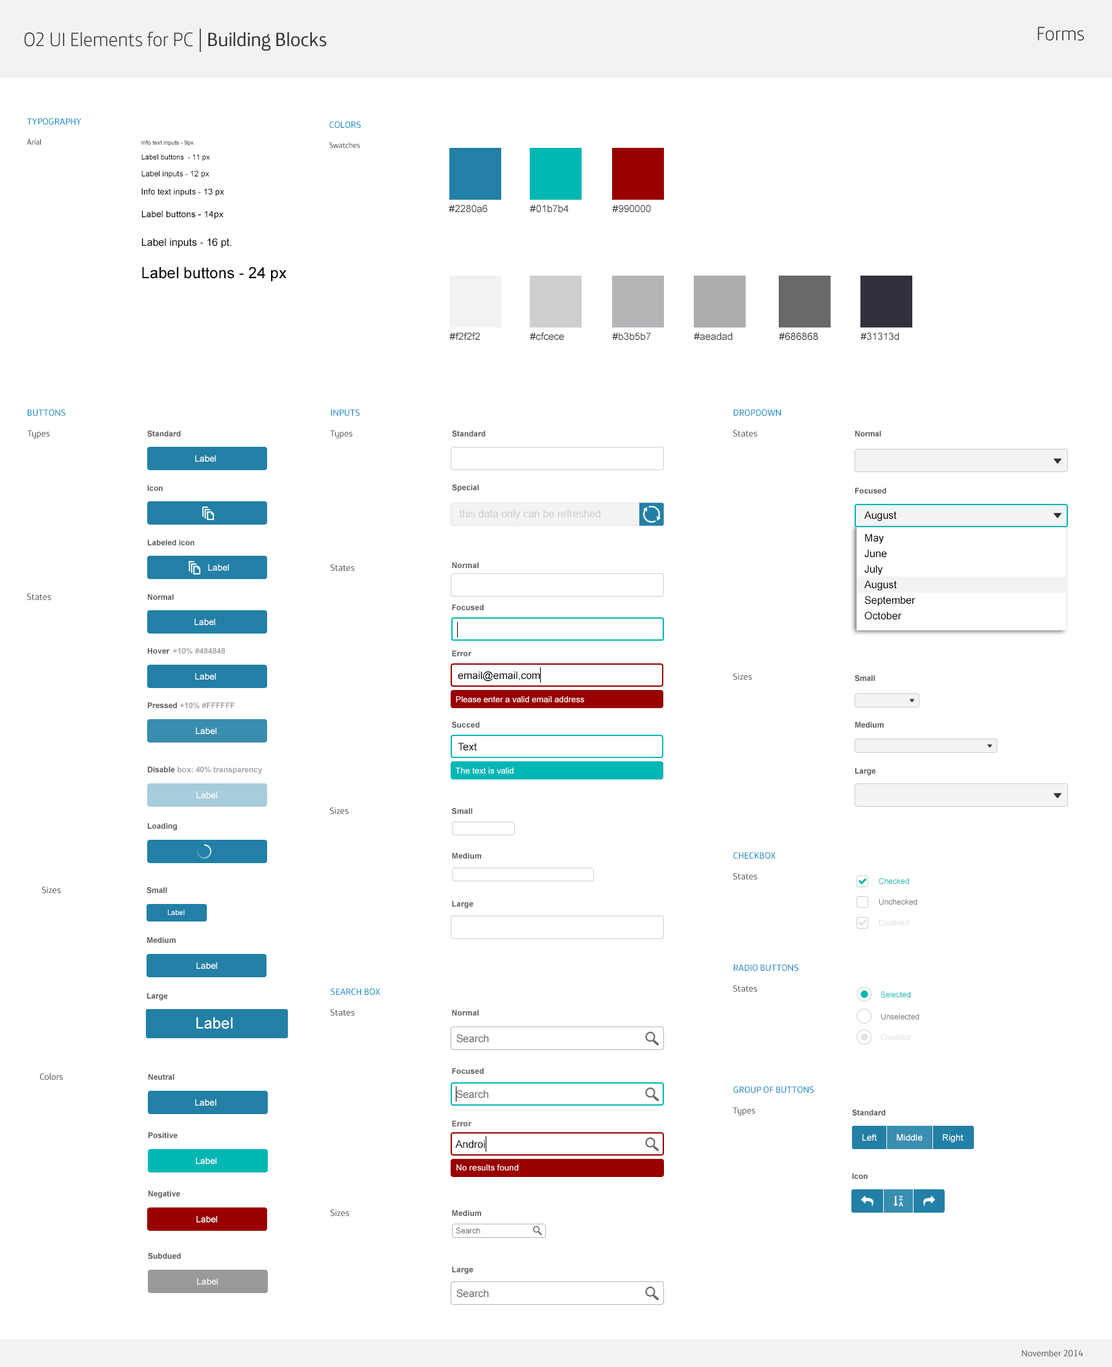
<style>
.page{position:relative;width:1112px;height:1367px;background:#ffffff}
.page>*{position:absolute;margin:0}
.t1{font:19.4px "TelefonicaHeadlineLight";color:#333333}
.t2{font:23.3px "TelefonicaHeadlineLight";color:#333333}
.t3{font:19.4px "TelefonicaText";color:#333333}
.t4{font:9.1px "TelefonicaText";color:#0086c3;text-transform:uppercase}
.t5{font:7.8px "MovistarText";color:#333333}
.t6{font:5.8px "ArialMT"}
.t7{font:7.8px "TelefonicaText";color:#333333}
.t8{font:7.1px "ArialMT";color:#000000}
.t9{font:7.8px "ArialMT";color:#000000}
.t10{font:8.4px "ArialMT";color:#000000}
.t11{font:9.9px "ArialMT";color:#444444}
.t12{font:9.9px "ArialMT";color:#333333;text-transform:uppercase}
.t13{font:9.1px "ArialMT";color:#000000}
.t14{font:10.4px "ArialMT";color:#000000}
.t15{font:15.6px "ArialMT";color:#000000}
.t16{font:9.1px "TelefonicaText";color:#585858}
.t17{font:7.8px "Arial-BoldMT";color:#585858}
.t18{font:9px "ArialMT";color:#ffffff}
.t19{font:10.4px "ArialMT";color:#cfcece}
.t20{font:10.4px/15.6px "ArialMT";color:#000000}
.t21{font:9.1px "ArialMT";color:#ffffff}
.t22{font:7.8px "Arial-BoldMT";color:#a6a5a5}
.t23{font:8.4px "ArialMT";color:#ffffff}
.t24{font:7.8px "ArialMT";color:#01b7b4}
.t25{font:7.8px "ArialMT";color:#767373}
.t26{font:7.1px "ArialMT";color:#ffffff}
.t27{font:7.8px "ArialMT";color:#cfcece}
.t28{font:15.6px "ArialMT";color:#ffffff}
.t29{font:10.4px "ArialMT";color:#696968}
.t30{font:7.8px "ArialMT";color:#686868}
</style>
<div class="page">
<p class="t1" style="left:24px;top:29px;width:303px;height:23px">O2 UI Elements for PC <span class="t2">| </span><span class="t3">Building Blocks</span></p>
<p class="t1" style="left:1038px;top:27px;width:46px;height:14px">Forms</p>
<p class="t4" style="left:27px;top:118px;width:55px;height:7px">Typography</p>
<p class="t4" style="left:329px;top:121px;width:32px;height:7px">Colors</p>
<p class="t5" style="left:27px;top:139px;width:14px;height:6px">Arial</p>
<p class="t6" style="left:141px;top:140px;width:53px;height:6px">Info text inputs - 9px</p>
<p class="t7" style="left:329px;top:142px;width:31px;height:7px">Swatches</p>
<p class="t8" style="left:141px;top:154px;width:69px;height:7px">Label buttons  - 11 px</p>
<p class="t9" style="left:141px;top:171px;width:68px;height:7px">Label inputs - 12 px</p>
<p class="t10" style="left:141px;top:188px;width:83px;height:8px">Info text inputs - 13 px</p>
<p class="t11" style="left:449px;top:205px;width:39px;height:8px"><span class="t12">#</span>2280a6</p>
<p class="t11" style="left:530px;top:205px;width:39px;height:8px"><span class="t12">#</span>01b7b4</p>
<p class="t11" style="left:612px;top:205px;width:39px;height:8px"><span class="t12">#</span>990000</p>
<p class="t13" style="left:142px;top:211px;width:82px;height:8px">Label buttons - 14px</p>
<p class="t14" style="left:142px;top:238px;width:90px;height:10px">Label inputs - 16 pt.</p>
<p class="t15" style="left:142px;top:267px;width:145px;height:14px">Label buttons - 24 px</p>
<p class="t11" style="left:449px;top:332px;width:31px;height:8px"><span class="t12">#</span>f2f2f2</p>
<p class="t11" style="left:530px;top:332px;width:34px;height:8px"><span class="t12">#</span>cfcece</p>
<p class="t11" style="left:612px;top:333px;width:39px;height:7px"><span class="t12">#</span>b3b5b7</p>
<p class="t11" style="left:694px;top:333px;width:39px;height:7px"><span class="t12">#</span>aeadad</p>
<p class="t12" style="left:779px;top:333px;width:39px;height:7px">#686868</p>
<p class="t11" style="left:861px;top:333px;width:38px;height:7px"><span class="t12">#</span>31313d</p>
<p class="t4" style="left:27px;top:409px;width:38px;height:7px">BUTTONS</p>
<p class="t4" style="left:331px;top:409px;width:29px;height:7px">INPUTS</p>
<p class="t4" style="left:733px;top:409px;width:48px;height:7px">DROPDOWN</p>
<p class="t16" style="left:27px;top:430px;width:23px;height:9px">Types</p>
<p class="t17" style="left:147px;top:431px;width:34px;height:6px">Standard</p>
<p class="t16" style="left:330px;top:430px;width:23px;height:9px">Types</p>
<p class="t17" style="left:452px;top:431px;width:34px;height:6px">Standard</p>
<p class="t16" style="left:733px;top:430px;width:24px;height:7px">States</p>
<p class="t17" style="left:855px;top:431px;width:26px;height:5px">Normal</p>
<p class="t18" style="left:195px;top:455px;width:21px;height:7px">Label</p>
<p class="t17" style="left:147px;top:485px;width:16px;height:6px">Icon</p>
<p class="t17" style="left:452px;top:484px;width:27px;height:8px">Special</p>
<p class="t17" style="left:855px;top:488px;width:31px;height:6px">Focused</p>
<p class="t19" style="left:459px;top:510px;width:142px;height:9px">this data only can be refreshed</p>
<p class="t14" style="left:864px;top:511px;width:33px;height:10px">August</p>
<p class="t20" style="left:864px;top:534px;width:52px;height:86px">May<br>June<br>July<br>August<br>September<br>October</p>
<p class="t17" style="left:148px;top:540px;width:47px;height:5px">Labeled icon</p>
<p class="t21" style="left:208px;top:564px;width:21px;height:7px">Label</p>
<p class="t16" style="left:330px;top:564px;width:25px;height:7px">States</p>
<p class="t17" style="left:452px;top:562px;width:27px;height:6px">Normal</p>
<p class="t16" style="left:27px;top:593px;width:24px;height:8px">States</p>
<p class="t17" style="left:148px;top:594px;width:26px;height:6px">Normal</p>
<p class="t17" style="left:452px;top:604px;width:32px;height:6px">Focused</p>
<p class="t18" style="left:195px;top:619px;width:20px;height:6px">Label</p>
<p class="t22" style="left:148px;top:648px;width:77px;height:6px"><span class="t17">Hover  </span>+10% #484848</p>
<p class="t17" style="left:452px;top:650px;width:19px;height:6px">Error</p>
<p class="t18" style="left:195px;top:673px;width:21px;height:7px">Label</p>
<p class="t14" style="left:458px;top:671px;width:82px;height:11px">email@email,com</p>
<p class="t16" style="left:733px;top:673px;width:19px;height:7px">Sizes</p>
<p class="t17" style="left:855px;top:675px;width:20px;height:7px">Small</p>
<p class="t23" style="left:456px;top:696px;width:128px;height:6px">Please enter a valid email address</p>
<p class="t22" style="left:148px;top:702px;width:87px;height:7px"><span class="t17">Pressed </span>+10% #FFFFFF</p>
<p class="t17" style="left:452px;top:722px;width:28px;height:6px">Succed</p>
<p class="t17" style="left:855px;top:722px;width:29px;height:6px">Medium</p>
<p class="t18" style="left:196px;top:728px;width:21px;height:6px">Label</p>
<p class="t14" style="left:458px;top:743px;width:19px;height:8px">Text</p>
<p class="t22" style="left:148px;top:767px;width:115px;height:7px"><span class="t17">Disable </span>box: 40% transparency</p>
<p class="t23" style="left:455px;top:767px;width:59px;height:7px">The text is valid</p>
<p class="t17" style="left:855px;top:768px;width:21px;height:8px">Large</p>
<p class="t18" style="left:196px;top:792px;width:21px;height:6px">Label</p>
<p class="t16" style="left:329px;top:807px;width:20px;height:8px">Sizes</p>
<p class="t17" style="left:452px;top:808px;width:21px;height:7px">Small</p>
<p class="t17" style="left:148px;top:823px;width:29px;height:8px">Loading</p>
<p class="t17" style="left:452px;top:853px;width:29px;height:6px">Medium</p>
<p class="t4" style="left:733px;top:852px;width:43px;height:7px">CHECKBOX</p>
<p class="t16" style="left:733px;top:873px;width:24px;height:7px">States</p>
<p class="t24" style="left:879px;top:878px;width:30px;height:7px">Checked</p>
<p class="t16" style="left:42px;top:886px;width:19px;height:8px">Sizes</p>
<p class="t17" style="left:147px;top:887px;width:20px;height:7px">Small</p>
<p class="t17" style="left:452px;top:901px;width:21px;height:8px">Large</p>
<p class="t25" style="left:879px;top:899px;width:39px;height:6px">Unchecked</p>
<p class="t26" style="left:168px;top:910px;width:17px;height:5px">Label</p>
<p class="t27" style="left:879px;top:920px;width:30px;height:5px;opacity:0.6">Disabled</p>
<p class="t17" style="left:147px;top:937px;width:29px;height:6px">Medium</p>
<p class="t18" style="left:196px;top:962px;width:21px;height:7px">Label</p>
<p class="t4" style="left:733px;top:964px;width:66px;height:7px">RADIO BUTTONS</p>
<p class="t4" style="left:331px;top:988px;width:49px;height:7px">SEARCH BOX</p>
<p class="t16" style="left:733px;top:985px;width:24px;height:7px">States</p>
<p class="t17" style="left:147px;top:993px;width:21px;height:8px">Large</p>
<p class="t24" style="left:881px;top:992px;width:29px;height:6px">Selected</p>
<p class="t16" style="left:330px;top:1009px;width:25px;height:7px">States</p>
<p class="t17" style="left:452px;top:1010px;width:27px;height:6px">Normal</p>
<p class="t25" style="left:881px;top:1014px;width:39px;height:6px">Unselected</p>
<p class="t28" style="left:196px;top:1017px;width:37px;height:12px">Label</p>
<p class="t29" style="left:457px;top:1034px;width:32px;height:9px">Search</p>
<p class="t27" style="left:881px;top:1034px;width:29px;height:6px;opacity:0.6">Disabled</p>
<p class="t16" style="left:40px;top:1073px;width:23px;height:7px">Colors</p>
<p class="t17" style="left:149px;top:1074px;width:25px;height:6px">Neutral</p>
<p class="t17" style="left:452px;top:1068px;width:32px;height:6px">Focused</p>
<p class="t29" style="left:457px;top:1090px;width:31px;height:9px">Search</p>
<p class="t4" style="left:733px;top:1086px;width:81px;height:7px">GROUP OF BUTTONS</p>
<p class="t21" style="left:195px;top:1099px;width:22px;height:7px">Label</p>
<p class="t16" style="left:733px;top:1107px;width:23px;height:9px">Types</p>
<p class="t17" style="left:852px;top:1110px;width:34px;height:6px">Standard</p>
<p class="t17" style="left:452px;top:1121px;width:19px;height:5px">Error</p>
<p class="t17" style="left:149px;top:1132px;width:29px;height:6px">Positive</p>
<p class="t14" style="left:455px;top:1140px;width:30px;height:8px">Androi</p>
<p class="t18" style="left:863px;top:1134px;width:14px;height:7px">Left</p>
<p class="t18" style="left:897px;top:1134px;width:26px;height:7px">Middle</p>
<p class="t18" style="left:943px;top:1134px;width:21px;height:9px">Right</p>
<p class="t18" style="left:196px;top:1158px;width:21px;height:6px">Label</p>
<p class="t23" style="left:457px;top:1164px;width:62px;height:7px">No results found</p>
<p class="t17" style="left:852px;top:1173px;width:16px;height:6px">Icon</p>
<p class="t17" style="left:149px;top:1191px;width:31px;height:7px">Negative</p>
<p class="t18" style="left:196px;top:1216px;width:21px;height:6px">Label</p>
<p class="t16" style="left:330px;top:1209px;width:20px;height:8px">Sizes</p>
<p class="t17" style="left:452px;top:1210px;width:29px;height:6px">Medium</p>
<p class="t30" style="left:456px;top:1228px;width:25px;height:6px">Search</p>
<p class="t17" style="left:148px;top:1253px;width:33px;height:6px">Subdued</p>
<p class="t17" style="left:452px;top:1267px;width:21px;height:7px">Large</p>
<p class="t18" style="left:197px;top:1278px;width:21px;height:7px">Label</p>
<p class="t29" style="left:457px;top:1289px;width:32px;height:9px">Search</p>
<p class="t16" style="left:1022px;top:1350px;width:61px;height:7px">November 2014</p>
</div>
